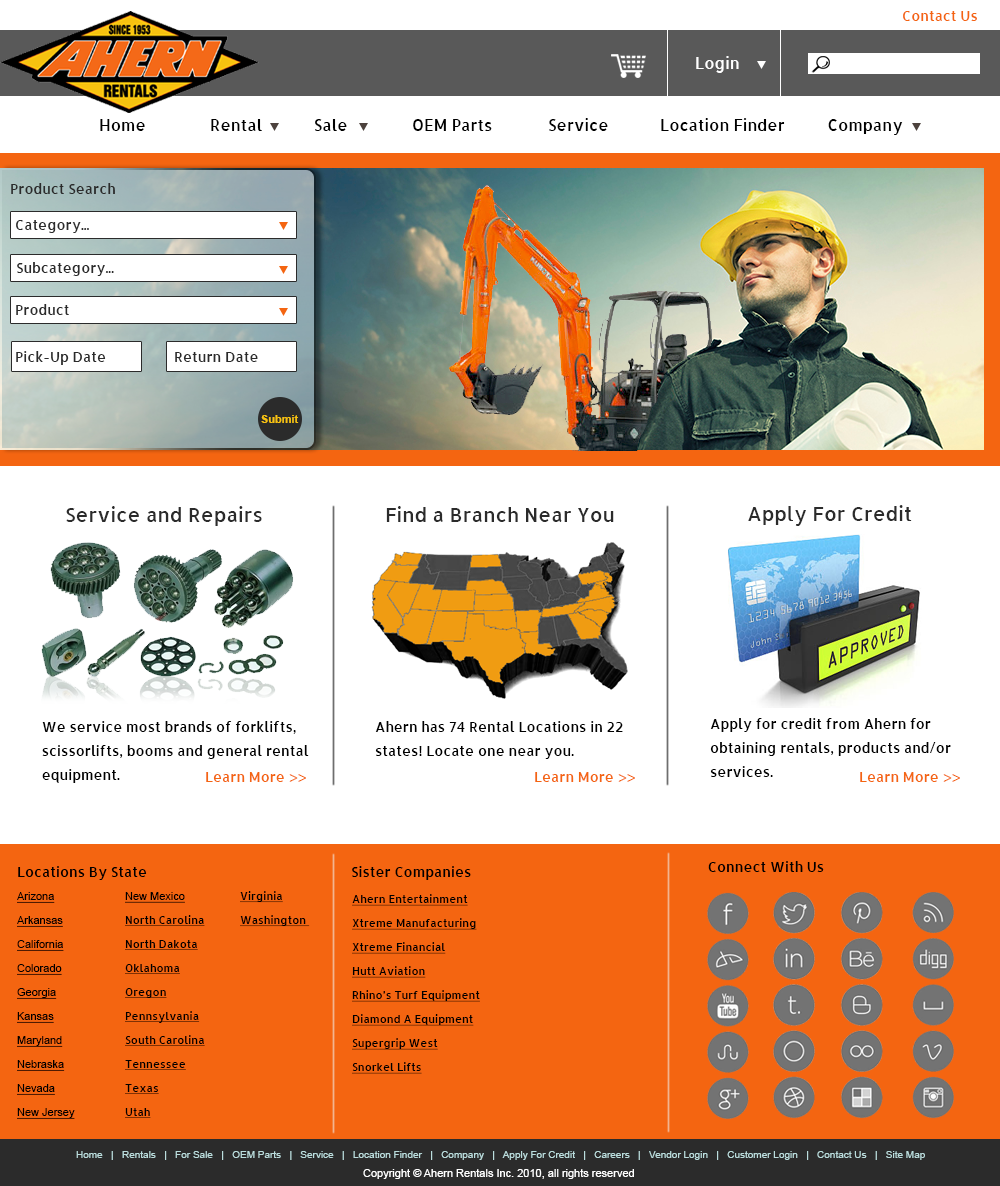
<style>
.page{position:relative;width:1000px;height:1186px;background:#ffffff}
.page>*{position:absolute;margin:0}
.t1{font:14px "Allerta-Medium";color:#f46511}
.t2{font:16px "Allerta-Medium";color:#ffffff}
.t3{font:16px "Allerta-Medium";color:#000000}
.t4{font:14px "Allerta-Medium";color:#2b2b2b}
.t5{font:11px "Arial-BoldMT";color:#f7c210}
.t6{font:20px "Allerta-Medium";color:#2b2b2b}
.t7{font:14px/24px "Allerta-Medium";color:#000000}
.t8{font:14px "Allerta-Medium";color:#000000}
.t9{font:11px/24px "ArialMT";color:#000000;text-decoration:underline}
.t10{font:11px/24px "Allerta-Medium";color:#000000;text-decoration:underline}
.t11{font:10px "ArialMT";color:#bbdddd}
.t12{font:11px "ArialMT";color:#ffffff}
</style>
<div class="page">
<p class="t1" style="left:903px;top:11px;width:74px;height:10px">Contact Us</p>
<p class="t2" style="left:696px;top:56px;width:43px;height:17px">Login</p>
<p class="t3" style="left:100px;top:118px;width:803px;height:17px">Home               Rental            Sale               OEM Parts             Service            Location Finder          Company</p>
<p class="t4" style="left:11px;top:183px;width:104px;height:11px">Product Search</p>
<p class="t4" style="left:16px;top:220px;width:73px;height:13px">Category...</p>
<p class="t4" style="left:17px;top:262px;width:97px;height:14px">Subcategory...</p>
<p class="t4" style="left:16px;top:304px;width:53px;height:11px">Product</p>
<p class="t4" style="left:16px;top:351px;width:90px;height:14px">Pick-Up Date</p>
<p class="t4" style="left:175px;top:352px;width:83px;height:10px">Return Date</p>
<p class="t5" style="left:261px;top:415px;width:38px;height:8px">Submit</p>
<p class="t6" style="left:66px;top:506px;width:196px;height:20px">Service and Repairs</p>
<p class="t6" style="left:386px;top:506px;width:228px;height:16px">Find a Branch Near You</p>
<p class="t6" style="left:748px;top:505px;width:164px;height:21px">Apply For Credit</p>
<p class="t7" style="left:42px;top:721px;width:267px;height:62px">We service most brands of forklifts, scissorlifts, booms and general rental equipment.</p>
<p class="t7" style="left:375px;top:721px;width:248px;height:38px">Ahern has 74 Rental Locations in 22 <br>states! Locate one near you.</p>
<p class="t7" style="left:710px;top:718px;width:241px;height:59px">Apply for credit from Ahern for <br>obtaining rentals, products and/or <br>services.</p>
<p class="t1" style="left:206px;top:772px;width:100px;height:10px">Learn More &gt;&gt;</p>
<p class="t1" style="left:535px;top:772px;width:100px;height:10px">Learn More &gt;&gt;</p>
<p class="t1" style="left:860px;top:772px;width:100px;height:10px">Learn More &gt;&gt;</p>
<p class="t8" style="left:18px;top:866px;width:129px;height:14px">Locations By State</p>
<p class="t8" style="left:352px;top:866px;width:119px;height:14px">Sister Companies</p>
<p class="t8" style="left:708px;top:861px;width:116px;height:11px">Connect With Us</p>
<p class="t9" style="left:17px;top:892px;width:58px;height:227px">Arizona<br>Arkansas<br>California<br>Colorado<br>Georgia<br>Kansas<br>Maryland<br>Nebraska<br>Nevada<br>New Jersey</p>
<p class="t10" style="left:125px;top:892px;width:80px;height:226px"><span class="t9">New Mexico<br></span>North Carolina<br>North Dakota<br>Oklahoma<br>Oregon<br>Pennsylvania<br>South Carolina<br>Tennessee<br>Texas<br>Utah</p>
<p class="t10" style="left:240px;top:891px;width:70px;height:36px">Virginia<br>Washington</p>
<p class="t10" style="left:352px;top:894px;width:128px;height:180px">Ahern Entertainment<br>Xtreme Manufacturing<br>Xtreme Financial<br>Hutt Aviation<br>Rhino’s Turf Equipment<br>Diamond A Equipment<br>Supergrip West<br>Snorkel Lifts</p>
<p class="t11" style="left:76px;top:1151px;width:849px;height:9px">Home   |   Rentals   |   For Sale   |   OEM Parts   |   Service   |   Location Finder   |   Company   |   Apply For Credit   |   Careers   |   Vendor Login   |   Customer Login   |   Contact Us   |   Site Map</p>
<p class="t12" style="left:363px;top:1169px;width:271px;height:10px">Copyright © Ahern Rentals Inc. 2010, all rights reserved</p>
</div>
